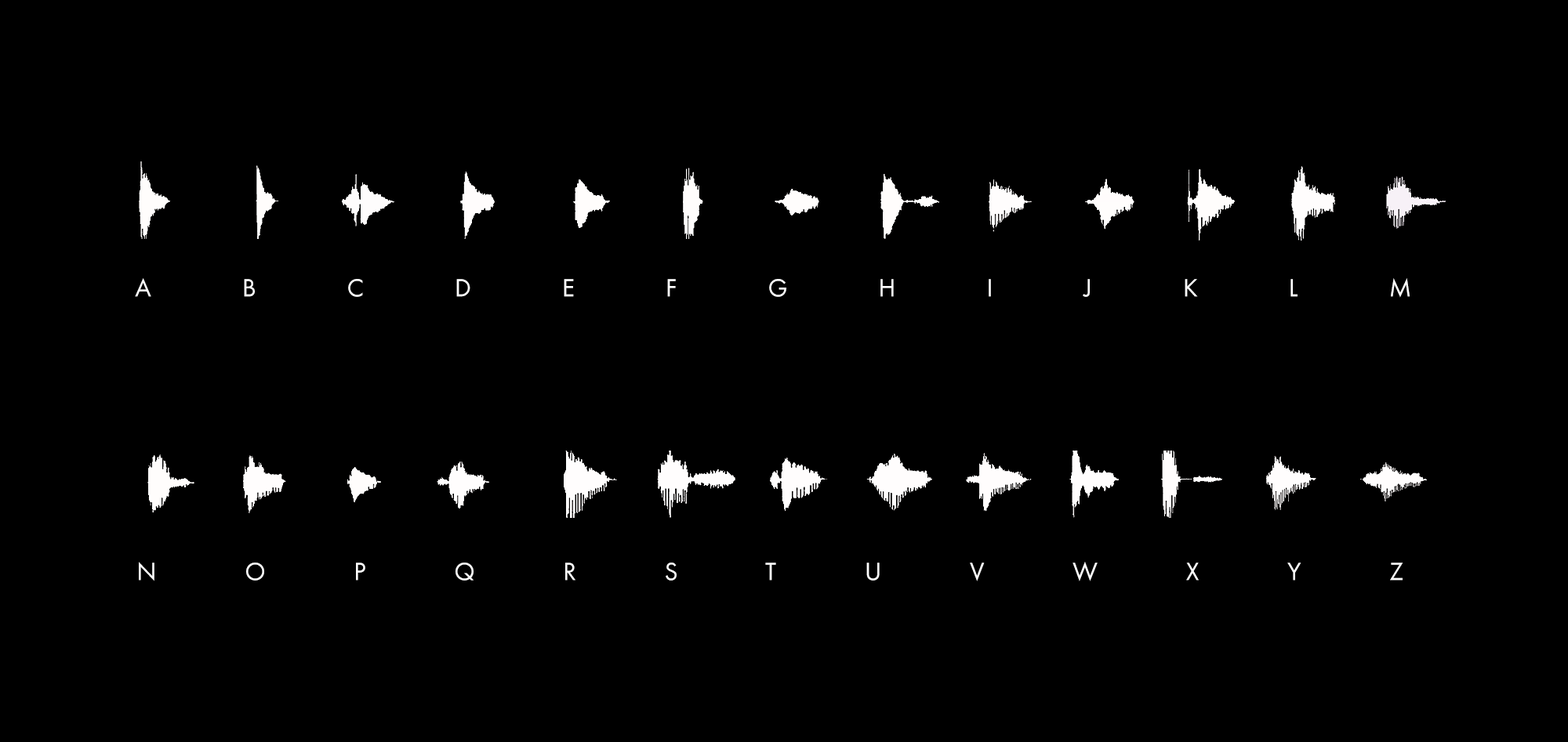
<style>
.page{position:relative;width:1568px;height:742px;background:#000000}
.page>*{position:absolute;margin:0}
.t1{font:26px "FuturaPT-Book";letter-spacing:3.5em;color:#ffffff}
.t2{font:26px "FuturaPT-Book";letter-spacing:3.4em;color:#ffffff}
</style>
<div class="page">
<p class="t1" style="left:135px;top:278px;width:1275px;height:20px">ABCDEFGHIJKLM</p>
<p class="t2" style="left:139px;top:562px;width:1264px;height:20px">NOPQRSTUVWXYZ</p>
</div>
